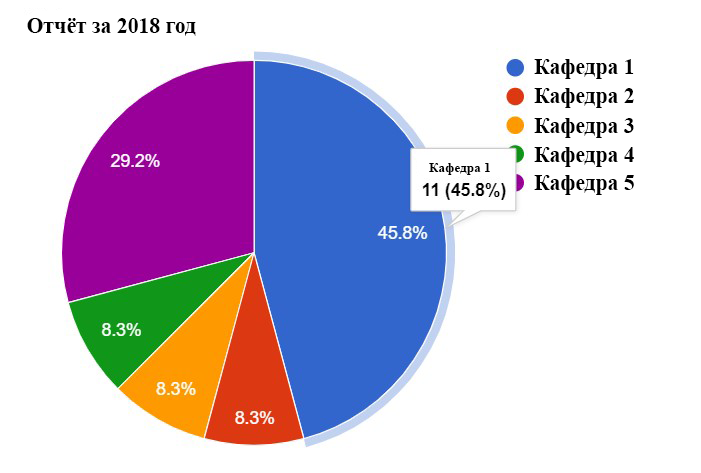
<style>
.page{position:relative;width:701px;height:473px;background:#ffffff}
.page>*{position:absolute;margin:0}
.t1{font:21.7px "TimesNewRomanPS-BoldMT";color:#000000}
.t2{font:13.3px "TimesNewRomanPS-BoldMT";color:#000000}
</style>
<div class="page">
<p class="t1" style="left:27px;top:18px;width:169px;height:18px">Отчёт за 2018 год</p>
<p class="t1" style="left:534px;top:59px;width:100px;height:20px">Кафедра 1</p>
<p class="t1" style="left:534px;top:88px;width:100px;height:20px">Кафедра 2</p>
<p class="t1" style="left:534px;top:118px;width:100px;height:20px">Кафедра 3</p>
<p class="t1" style="left:534px;top:147px;width:100px;height:20px">Кафедра 4</p>
<p class="t2" style="left:429px;top:163px;width:61px;height:12px">Кафедра 1</p>
<p class="t1" style="left:534px;top:175px;width:100px;height:20px">Кафедра 5</p>
</div>
